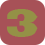
<style>
.page{position:relative;width:45px;height:45px;background:#a75157}
.page>*{position:absolute;margin:0}
.t1{font:50px "Saddlebag-Black";color:#949146}
</style>
<div class="page">
<p class="t1" style="left:7px;top:9px;width:31px;height:28px">3</p>
</div>
